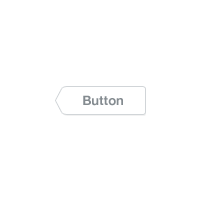
<style>
.page{position:relative;width:200px;height:200px;background:#ffffff}
.page>*{position:absolute;margin:0}
.t1{font:13px "HelveticaNeue-Bold";color:#848b90}
</style>
<div class="page">
<p class="t1" style="left:83px;top:95px;width:40px;height:11px">Button</p>
</div>
